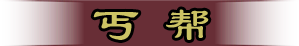
<style>
.page{position:relative;width:299px;height:46px;background:#682e36}
.page>*{position:absolute;margin:0}
.t1{font:48px "LiSu";color:#ccc364}
</style>
<div class="page">
<p class="t1" style="left:93px;top:9px;width:116px;height:31px">丐 帮</p>
</div>
